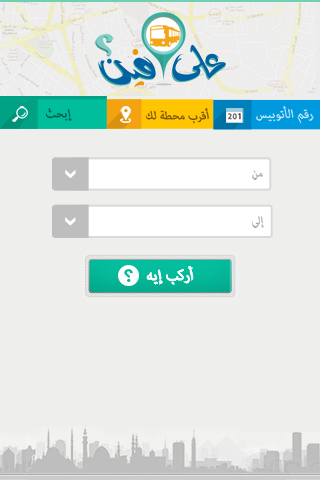
<style>
.page{position:relative;width:320px;height:480px;background:#eeeeed}
.page>*{position:absolute;margin:0}
.t1{font:16px "Arial-BlackItalic";letter-spacing:0.025em;color:#014f41}
.t2{font:16px "Arial-BlackItalic";color:#714a03}
.t3{font:17.2px "Arial-BlackItalic";color:#bde8fb}
.t4{font:15.6px "Arial-BlackItalic";color:#a5a5a5;scale:0.88 1}
.t5{font:20px "Arial-BlackItalic";color:#ffffff}
</style>
<div class="page">
<p class="t1" style="left:46px;top:108px;width:26px;height:13px">إبحث</p>
<p class="t1" style="left:46px;top:108px;width:26px;height:13px">إبحث</p>
<p class="t2" style="left:146px;top:108px;width:63px;height:16px">أقرب محطة لك</p>
<p class="t3" style="left:256px;top:106px;width:58px;height:18px">رقم الأتوبيس</p>
<p class="t4" style="left:252px;top:170px;width:11px;height:10px">من</p>
<p class="t4" style="left:252px;top:216px;width:12px;height:12px">إلى</p>
<p class="t5" style="left:147px;top:266px;width:46px;height:19px">أركب إيه</p>
</div>
